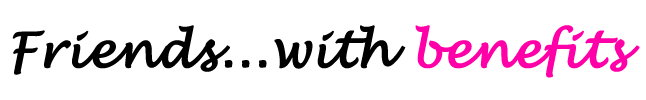
<style>
.page{position:relative;width:646px;height:100px;background:#ffffff}
.page>*{position:absolute;margin:0}
.t1{font:48px "LucidaHandwriting-Italic";color:#000000;font-weight:bold}
.t2{font:48px "LucidaHandwriting-Italic";color:#ff00a8;font-weight:bold}
</style>
<div class="page">
<p class="t1" style="left:12px;top:25px;width:628px;height:53px">Friends...with <span class="t2">benefits</span></p>
</div>
